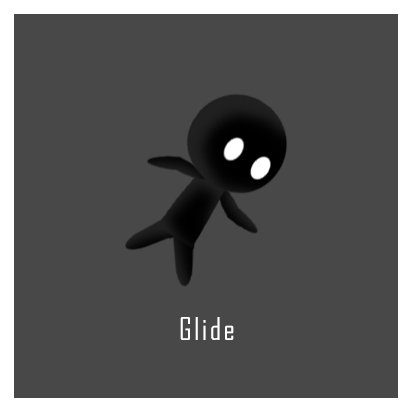
<style>
.page{position:relative;width:412px;height:412px;background:#484848}
.page>*{position:absolute;margin:0}
.t1{font:30px "AgencyFB-Reg";letter-spacing:0.08em;color:#ffffff}
</style>
<div class="page">
<p class="t1" style="left:180px;top:317px;width:54px;height:23px">Glide</p>
</div>
